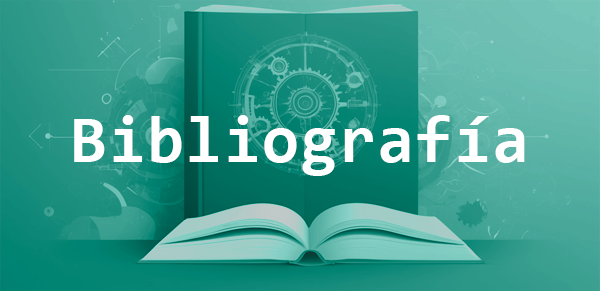
<style>
.page{position:relative;width:600px;height:291px}
.page>*{position:absolute;margin:0}
.t1{font:66.7px "Consolas-Bold";letter-spacing:0.025em;color:#ffffff}
</style>
<div class="page">
<p class="t1" style="left:74px;top:115px;width:451px;height:61px">Bibliografía</p>
</div>
